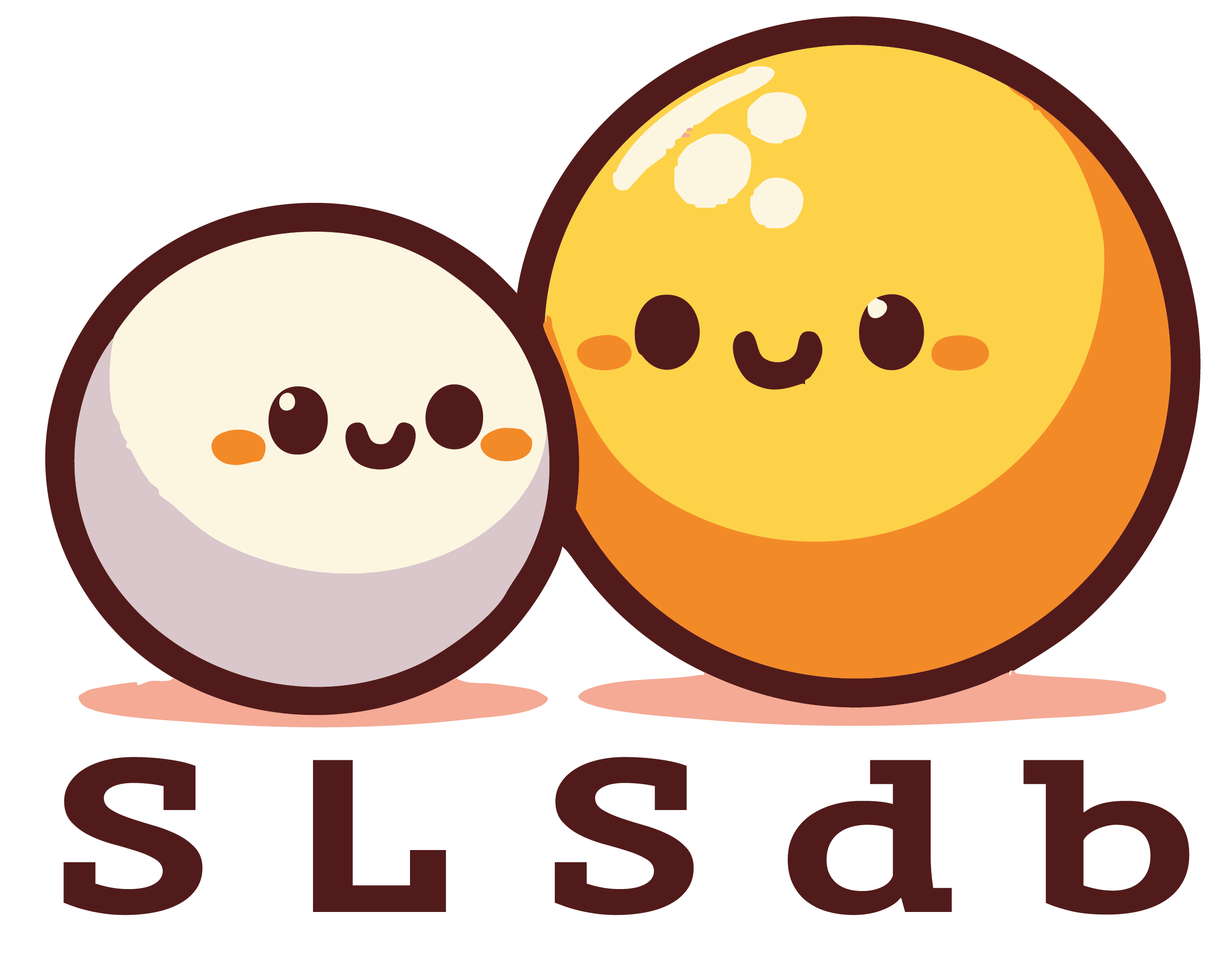
<style>
.page{position:relative;width:1230px;height:970px;background:#ffffff}
.page>*{position:absolute;margin:0}
.t1{font:216.7px "PTMono-Bold";letter-spacing:0.25em;color:#521b1b;scale:1.33 1}
</style>
<div class="page">
<p class="t1" style="left:63px;top:757px;width:1126px;height:158px">SLSdb</p>
</div>
